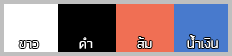
<style>
.page{position:relative;width:232px;height:56px;background:#000000}
.page>*{position:absolute;margin:0}
.t1{font:18.1px "FCActiveRegular";color:#ffffff}
</style>
<div class="page">
<p class="t1" style="left:19px;top:41px;width:20px;height:7px">ขาว</p>
<p class="t1" style="left:79px;top:37px;width:14px;height:12px">ดำ</p>
<p class="t1" style="left:137px;top:37px;width:15px;height:11px">ส้ม</p>
<p class="t1" style="left:187px;top:35px;width:31px;height:13px">น้ำเงิน</p>
</div>
